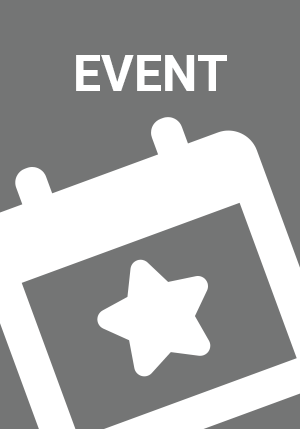
<style>
.page{position:relative;width:300px;height:429px;background:#747575}
.page>*{position:absolute;margin:0}
.t1{font:50px "Roboto-Bold";color:#ffffff;text-transform:uppercase}
</style>
<div class="page">
<p class="t1" style="left:76px;top:55px;width:151px;height:36px">Event</p>
</div>
